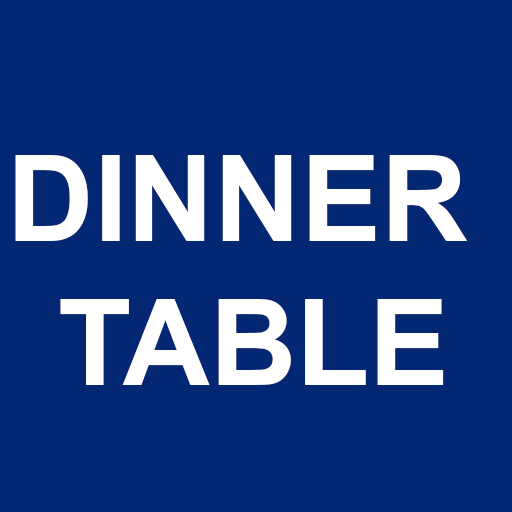
<style>
.page{position:relative;width:512px;height:512px;background:#042774}
.page>*{position:absolute;margin:0}
.t1{font:120px "Arial-BoldMT";color:#ffffff}
</style>
<div class="page">
<p class="t1" style="left:15px;top:155px;width:453px;height:230px;text-align:center">DINNER <br>TABLE</p>
</div>
